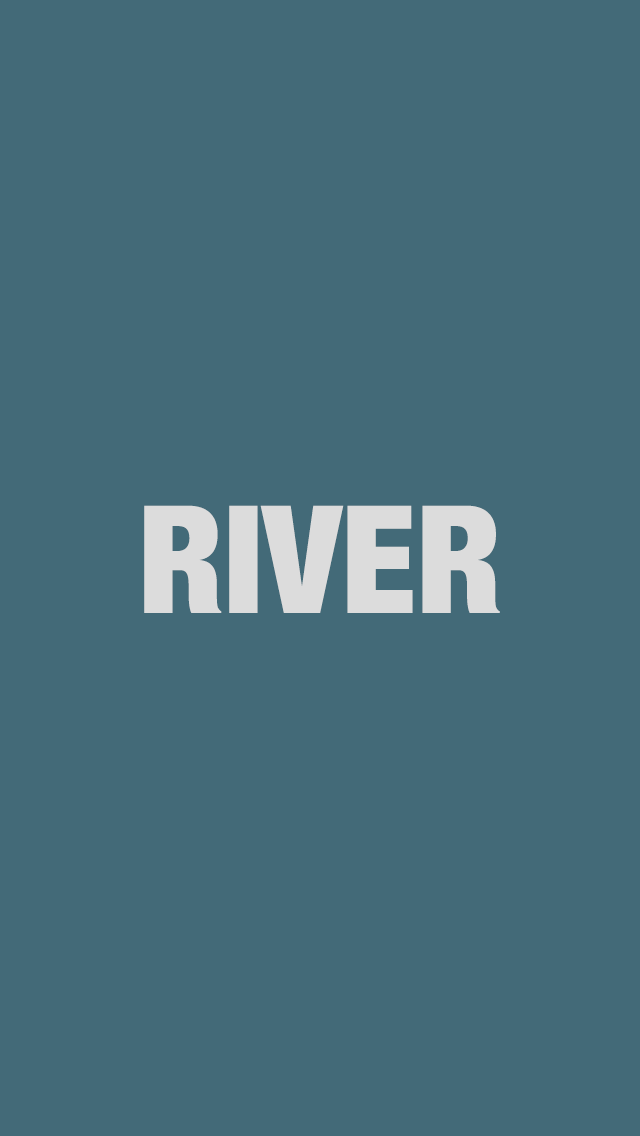
<style>
.page{position:relative;width:640px;height:1136px;background:#436a78}
.page>*{position:absolute;margin:0}
.t1{font:150px "HelveticaNeueLTStd-BlkCn";color:#dcdcdc}
</style>
<div class="page">
<p class="t1" style="left:144px;top:505px;width:356px;height:108px">RIVER</p>
</div>
